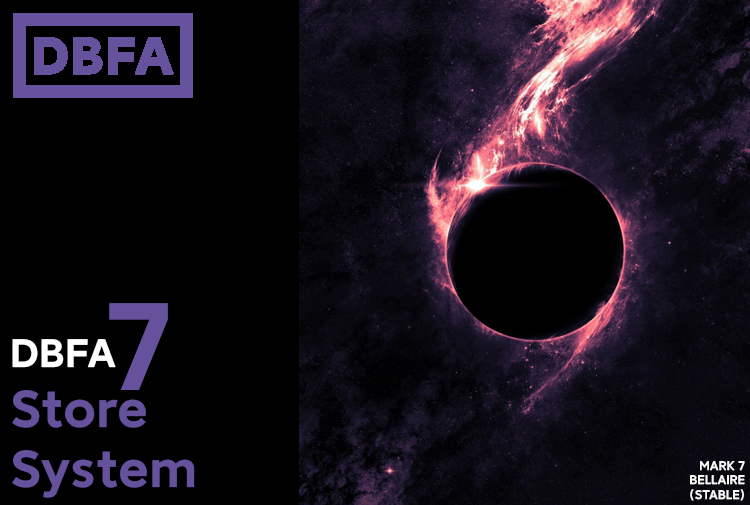
<style>
.page{position:relative;width:750px;height:505px;background:#000000}
.page>*{position:absolute;margin:0}
.t1{font:120px "MILanProVF-SemiBold";color:#66529c}
.t2{font:50px "MILanProVF-SemiBold";color:#66529c}
.t3{font:38.3px "MILanProVF-SemiBold";color:#ffffff}
.t4{font:12px "MILanProVF-Medium";color:#f9f6f6}
</style>
<div class="page">
<p class="t1" style="left:109px;top:303px;width:59px;height:87px">7</p>
<p class="t2" style="left:12px;top:339px;width:183px;height:159px"><span class="t3">DBFA<br></span>Store<br>System</p>
<p class="t4" style="left:690px;top:461px;width:55px;height:40px;text-align:right">MARK 7<br>BELLAIRE<br>(STABLE)</p>
</div>
